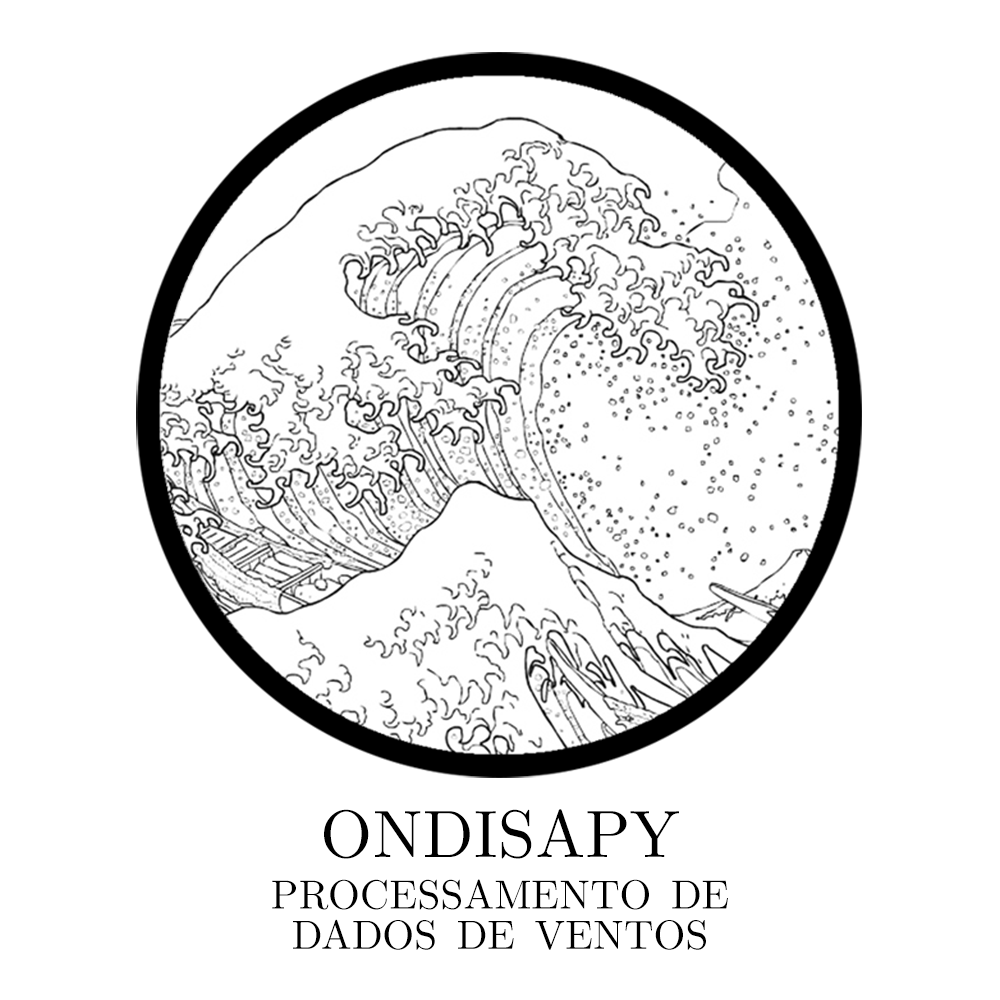
<style>
.page{position:relative;width:1000px;height:1000px;background:#ffffff}
.page>*{position:absolute;margin:0}
.t1{font:66.7px "CMUSerif-Roman";color:#000000}
.t2{font:58.3px "CMUSerif-Roman";color:#000000;font-variant:small-caps}
</style>
<div class="page">
<p class="t1" style="left:324px;top:809px;width:355px;height:50px">ONDISAPY</p>
<p class="t2" style="left:272px;top:879px;width:456px;height:31px">processamento de</p>
<p class="t2" style="left:293px;top:919px;width:413px;height:31px">dados de ventos</p>
</div>
